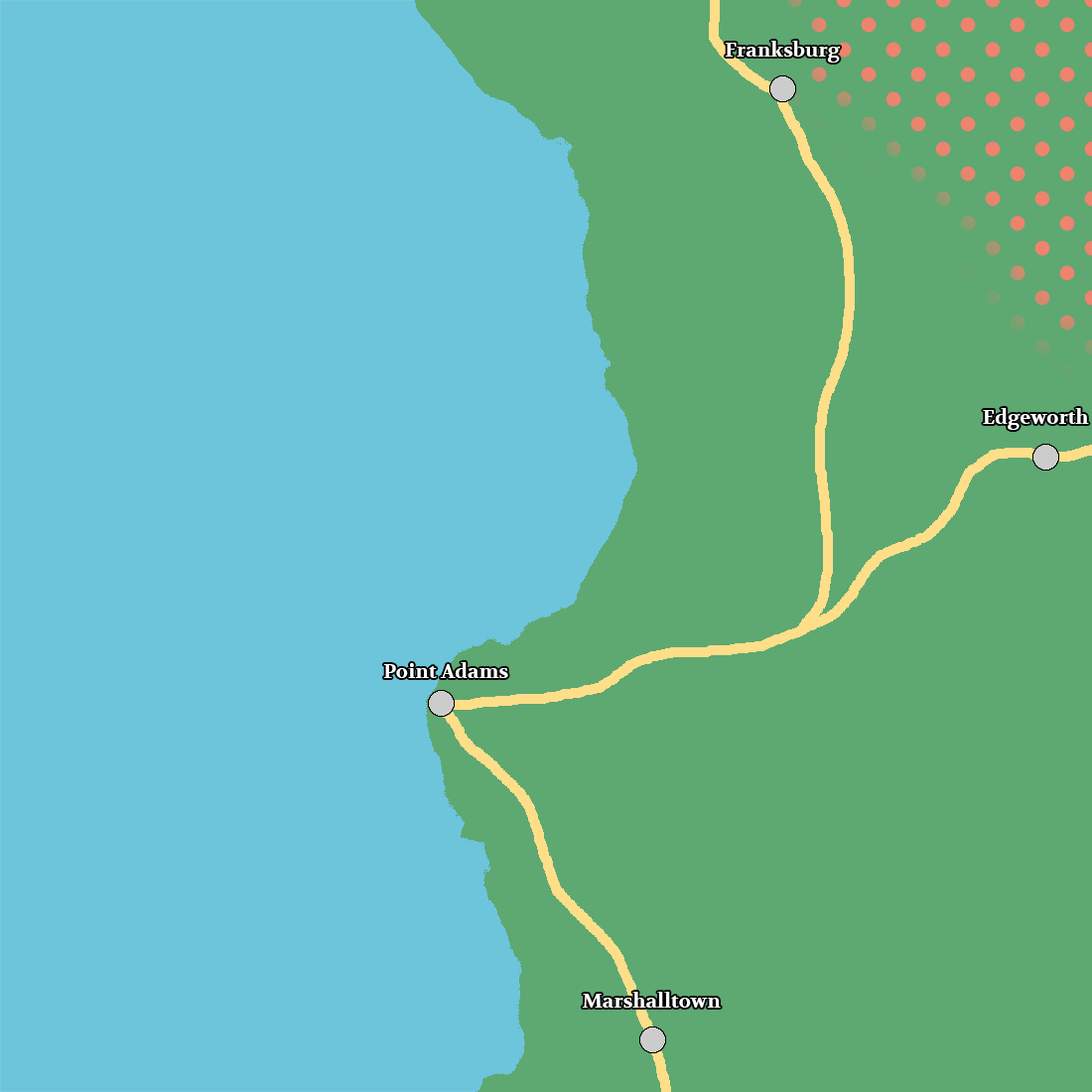
<style>
.page{position:relative;width:1092px;height:1092px;background:#6dc5dc}
.page>*{position:absolute;margin:0}
.t1{font:19.9px "Volkhov-Bold";color:#ffffff}
</style>
<div class="page">
<p class="t1" style="left:725px;top:41px;width:115px;height:22px">Franksburg</p>
<p class="t1" style="left:983px;top:408px;width:106px;height:22px">Edgeworth</p>
<p class="t1" style="left:383px;top:662px;width:125px;height:16px">Point Adams</p>
<p class="t1" style="left:582px;top:992px;width:139px;height:16px">Marshalltown</p>
</div>
